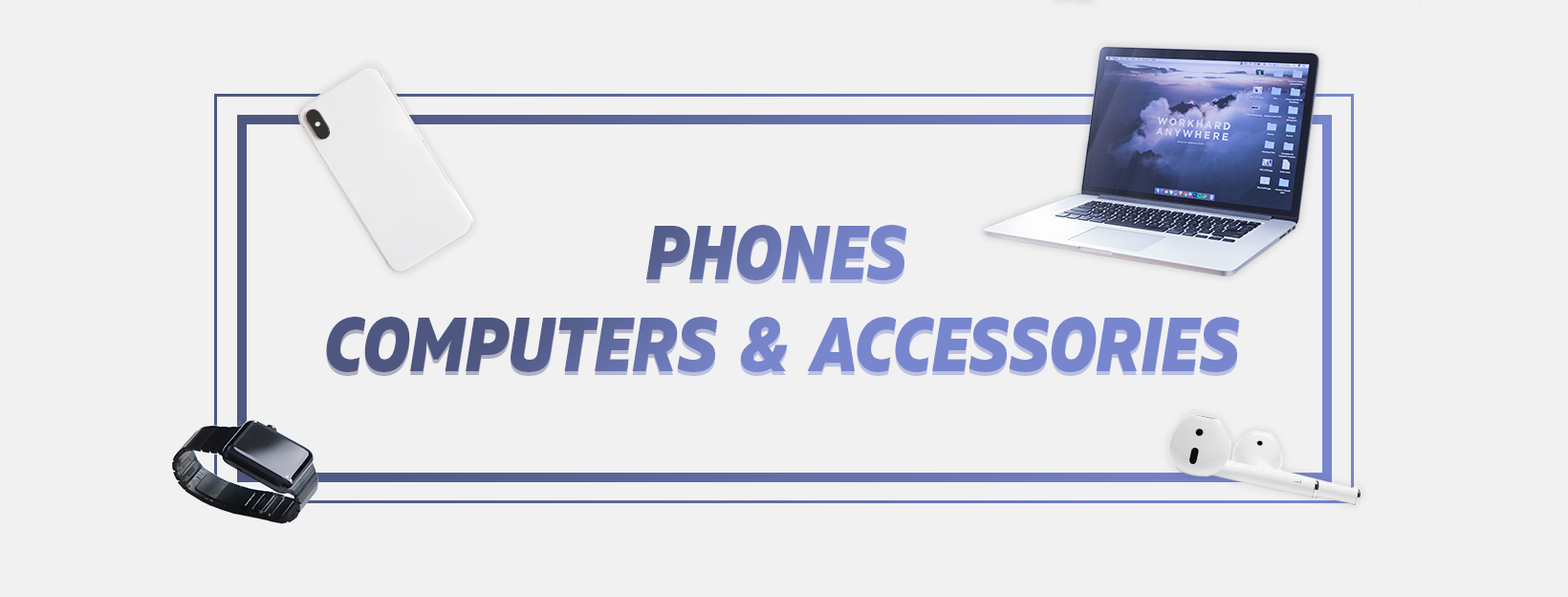
<style>
.page{position:relative;width:1568px;height:597px;background:#f1f1f2}
.page>*{position:absolute;margin:0}
.t1{font:76.5px "MullerNarrow-ExtraBoldItalic"}
</style>
<div class="page">
<p class="t1" style="left:326px;top:229px;width:914px;height:147px;text-align:center">PHONES <br>COMPUTERS  &amp;  ACCESSORIES</p>
<p class="t1" style="left:326px;top:225px;width:914px;height:147px;text-align:center">PHONES <br>COMPUTERS  &amp;  ACCESSORIES</p>
</div>
